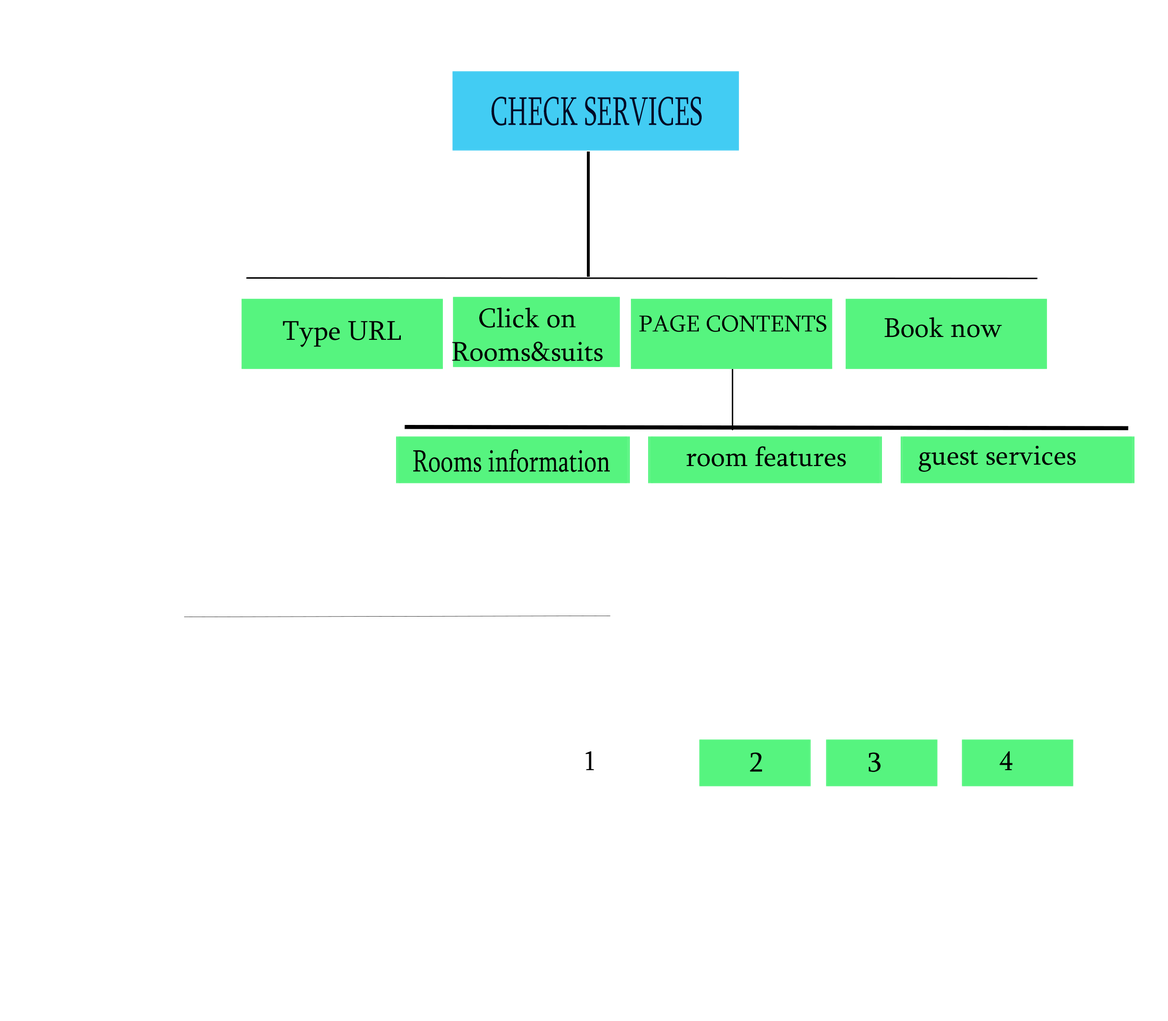
<style>
.page{position:relative;width:1168px;height:1021px;background:#ffffff}
.page>*{position:absolute;margin:0}
.t1{font:30.2px "Sylfaen";color:#030826;scale:0.64 1}
.t2{font:27.9px "Sylfaen";color:#000000}
.t3{font:23.7px "Sylfaen";color:#000000}
.t4{font:31.7px "Sylfaen";color:#000000;scale:0.77 1}
</style>
<div class="page">
<p class="t1" style="left:491px;top:97px;width:210px;height:29px">CHECK SERVICES</p>
<p class="t2" style="left:452px;top:307px;width:150px;height:54px;text-align:center">Click on<br>Rooms&amp;suits</p>
<p class="t3" style="left:639px;top:315px;width:187px;height:17px">PAGE CONTENTS</p>
<p class="t2" style="left:884px;top:317px;width:118px;height:21px">Book now</p>
<p class="t2" style="left:283px;top:321px;width:118px;height:26px">Type URL</p>
<p class="t4" style="left:413px;top:449px;width:197px;height:23px">Rooms information</p>
<p class="t2" style="left:686px;top:446px;width:160px;height:21px">room features</p>
<p class="t2" style="left:918px;top:446px;width:157px;height:26px">guest services</p>
<p class="t2" style="left:585px;top:751px;width:9px;height:20px">1</p>
<p class="t2" style="left:749px;top:753px;width:13px;height:19px">2</p>
<p class="t2" style="left:868px;top:753px;width:12px;height:19px">3</p>
<p class="t2" style="left:999px;top:751px;width:13px;height:20px">4</p>
</div>
